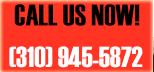
<style>
.page{position:relative;width:154px;height:72px;background:#ff3423}
.page>*{position:absolute;margin:0}
.t1{font:30px "Haettenschweiler";color:#000000}
.t2{font:29px "Haettenschweiler";color:#ffffff}
</style>
<div class="page">
<p class="t1" style="left:14px;top:4px;width:126px;height:22px">CALL US NOW!</p>
<p class="t2" style="left:9px;top:46px;width:134px;height:22px">(310) 945-5872</p>
</div>
